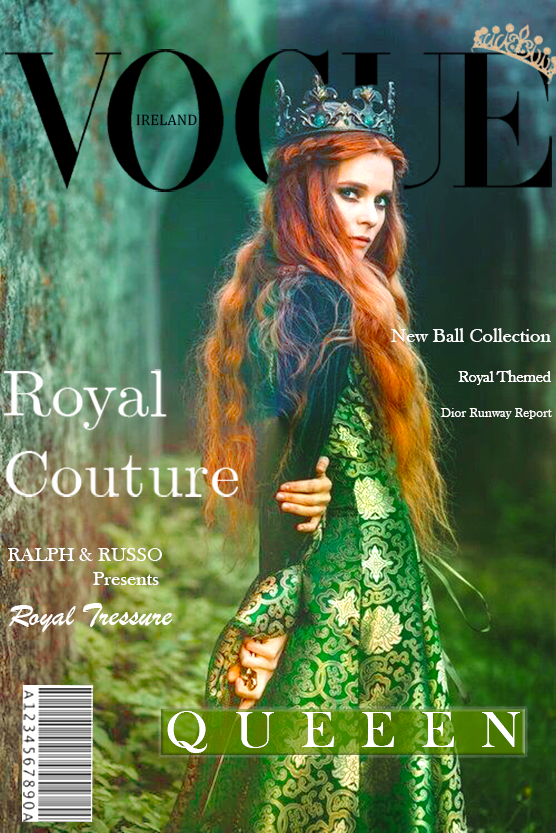
<style>
.page{position:relative;width:556px;height:833px}
.page>*{position:absolute;margin:0}
.t1{font:15.3px "CambriaMath";color:#00060c}
.t2{font:20px "BaskOldFace";color:#fefefe}
.t3{font:66.6px "Euclid";color:#fefefe}
.t4{font:15.5px "BaskOldFace";color:#fefefe}
.t5{font:13.3px "BaskOldFace";color:#fefefe}
.t6{font:20px "BaskOldFace";color:#ffffff}
.t7{font:33.3px "BrushScriptMT";color:#ffffff}
.t8{font:53.3px "BaskOldFace";color:#fefefe}
</style>
<div class="page">
<p class="t1" style="left:136px;top:114px;width:61px;height:12px">IRELAND</p>
<p class="t2" style="left:391px;top:328px;width:160px;height:14px">New Ball Collection</p>
<p class="t3" style="left:4px;top:369px;width:234px;height:128px">Royal <br>Couture</p>
<p class="t4" style="left:458px;top:370px;width:93px;height:15px">Royal Themed</p>
<p class="t5" style="left:441px;top:408px;width:111px;height:11px">Dior Runway Report</p>
<p class="t6" style="left:7px;top:548px;width:165px;height:84px">RALPH &amp; RUSSO <br>   Presents <br><span class="t7">Royal Tressure</span></p>
<p class="t8" style="left:167px;top:711px;width:353px;height:42px">Q  U  E  E  E  N</p>
</div>
